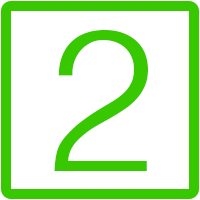
<style>
.page{position:relative;width:200px;height:200px;background:#ffffff}
.page>*{position:absolute;margin:0}
.t1{font:200px "Helvetica-Light";color:#37c800}
</style>
<div class="page">
<p class="t1" style="left:54px;top:30px;width:94px;height:141px">2</p>
</div>
